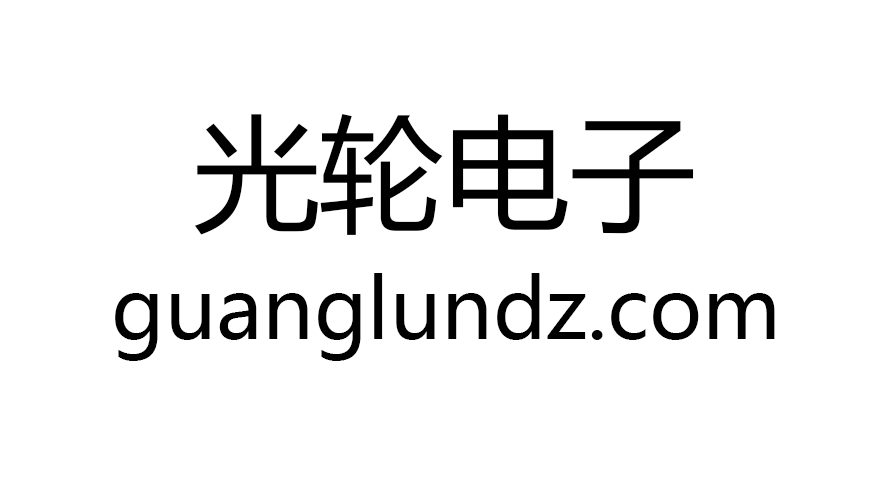
<style>
.page{position:relative;width:890px;height:492px;background:#ffffff}
.page>*{position:absolute;margin:0}
.t1{font:125px "MicrosoftYaHei";color:#000000}
.t2{font:83.3px "MicrosoftYaHei";color:#000000}
</style>
<div class="page">
<p class="t1" style="left:194px;top:114px;width:500px;height:121px">光轮电子</p>
<p class="t2" style="left:115px;top:273px;width:660px;height:88px">guanglundz.com</p>
</div>
